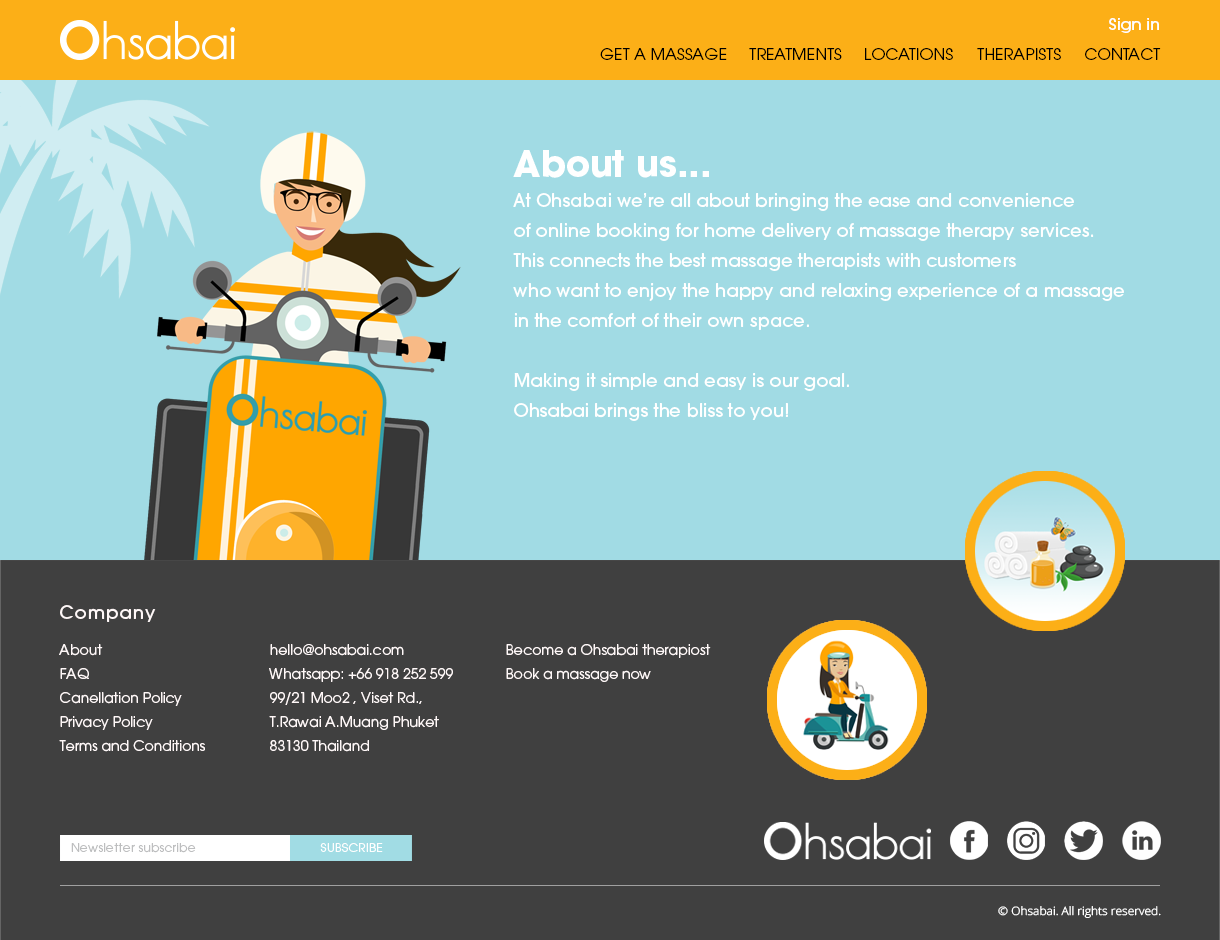
<style>
.page{position:relative;width:1220px;height:940px;background:#a1dbe4}
.page>*{position:absolute;margin:0}
.t1{font:15.2px "ITCAvantGardePro-Md";color:#ffffff;scale:1.05 1}
.t2{font:15.2px "ITCAvantGardePro-Bk";color:#000000;scale:1.05 1}
.t3{font:18px/30px "ITCAvantGardePro-Md";color:#ffffff}
.t4{font:36px/38.9px "ITCAvantGardePro-Bold";color:#ffffff}
.t5{font:14px/24px "ITCAvantGardePro-Bk";color:#fff8f8}
.t6{font:18px/24px "ITCAvantGardePro-Md";letter-spacing:0.05em;color:#fff8f8}
.t7{font:14px/36px "ITCAvantGardePro-Bk";color:#fff8f8}
.t8{font:12px "ITCAvantGardePro-Bk";letter-spacing:0.025em;color:#bdbebf}
.t9{font:12px "ITCAvantGardePro-Bk";letter-spacing:0.025em;color:#fefefe}
.t10{font:11.4px "OpenSans-Light";color:#ffffff;scale:1.05 1}
</style>
<div class="page">
<p class="t1" style="left:1109px;top:18px;width:50px;height:15px">Sign in</p>
<p class="t2" style="left:600px;top:48px;width:127px;height:12px">GET A MASSAGE</p>
<p class="t2" style="left:749px;top:48px;width:204px;height:12px">TREATMENTS     LOCATIONS</p>
<p class="t2" style="left:977px;top:48px;width:84px;height:12px">THERAPISTS</p>
<p class="t2" style="left:1085px;top:48px;width:76px;height:12px">CONTACT</p>
<p class="t3" style="left:513px;top:150px;width:611px;height:271px"><span class="t4">About us... <br></span>At Ohsabai we’re all about bringing the ease and convenience <br>of online booking for home delivery of massage therapy services. <br>This connects the best massage therapists with customers <br>who want to enjoy the happy and relaxing experience of a massage <br>in the comfort of their own space.<br><br>Making it simple and easy is our goal. <br>Ohsabai brings the bliss to you!</p>
<p class="t5" style="left:59px;top:605px;width:146px;height:147px;text-align:justify"><span class="t6">Company<br></span><span class="t7">About<br></span>FAQ<br>Canellation Policy<br>Privacy Policy<br>Terms and Conditions</p>
<p class="t5" style="left:269px;top:644px;width:184px;height:108px;text-align:justify"><span class="t6"> </span><span class="t7"><br>hello@ohsabai.com<br></span>Whatsapp: +66 918 252 599<br>99/21 Moo2 , Viset Rd., <br>T.Rawai A.Muang Phuket <br>83130 Thailand</p>
<p class="t7" style="left:506px;top:644px;width:205px;height:38px;text-align:justify"><span class="t6"> <br></span>Become a Ohsabai therapiost<span class="t5"><br>Book a massage now</span></p>
<p class="t8" style="left:71px;top:843px;width:125px;height:10px">Newsletter subscribe</p>
<p class="t9" style="left:320px;top:843px;width:63px;height:9px">SUBSCRIBE</p>
<p class="t10" style="left:998px;top:906px;width:163px;height:12px">© Ohsabai. All rights reserved.</p>
</div>
